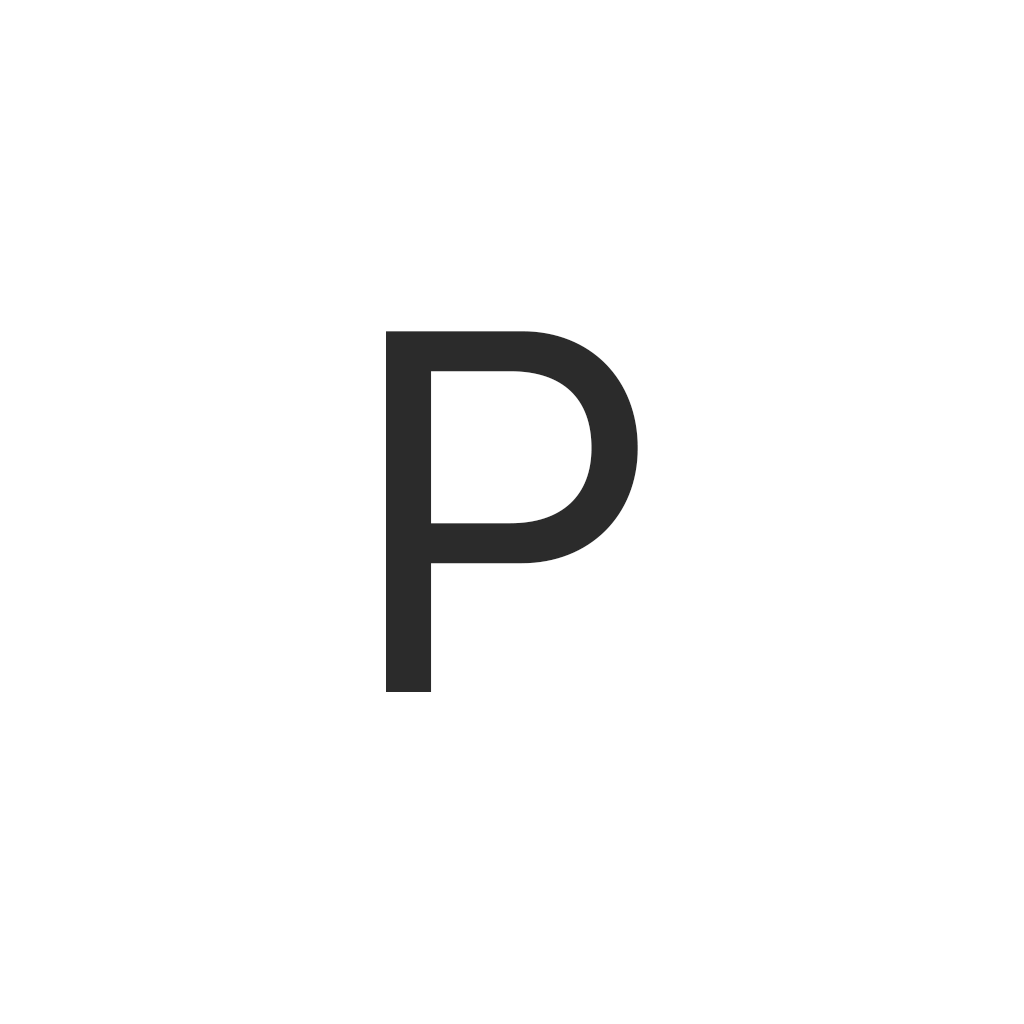
<style>
.page{position:relative;width:1024px;height:1024px;background:#ffffff}
.page>*{position:absolute;margin:0}
.t1{font:512px "SFProText-Regular";color:#2b2b2b}
</style>
<div class="page">
<p class="t1" style="left:386px;top:331px;width:252px;height:361px">P</p>
</div>
